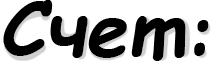
<style>
.page{position:relative;width:220px;height:61px;background:#ffffff}
.page>*{position:absolute;margin:0}
.t1{font:75px "ComicSansMS-BoldItalic";color:#000000}
</style>
<div class="page">
<p class="t1" style="left:3px;top:0px;width:183px;height:61px">Счет</p>
<p class="t1" style="left:194px;top:20px;width:15px;height:36px">:</p>
</div>
